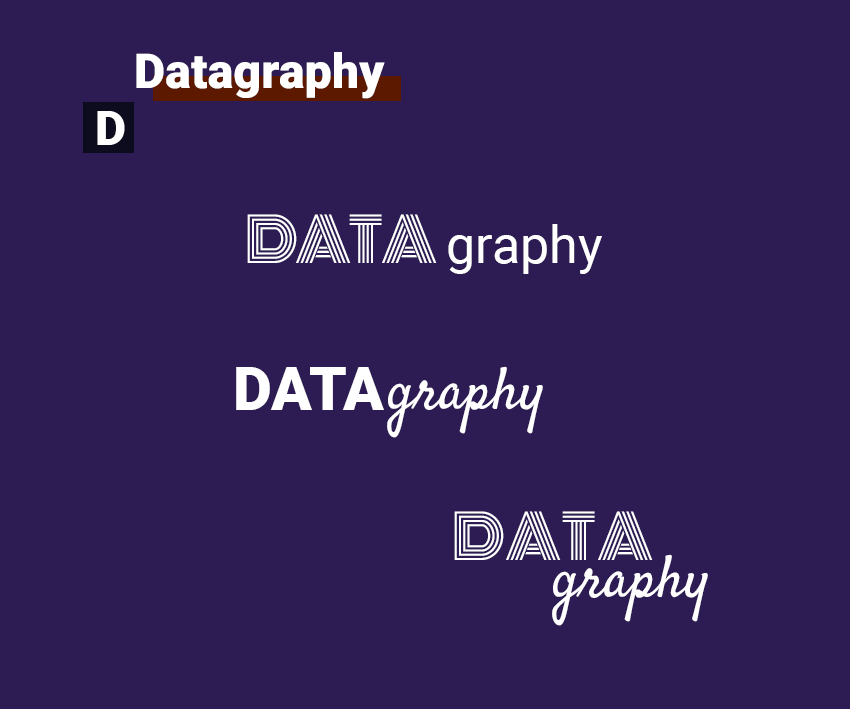
<style>
.page{position:relative;width:850px;height:709px;background:#2d1c54}
.page>*{position:absolute;margin:0}
.t1{font:48px "Roboto-Black";letter-spacing:0.005em;color:#ffffff}
.t2{font:52px "Roboto-Regular";color:#ffffff}
.t3{font:60px "Monoton-Regular";letter-spacing:-0.05em;color:#ffffff}
.t4{font:60px "Satisfy";color:#ffffff}
.t5{font:60px "Roboto-Regular";letter-spacing:-0.18em;color:#ffffff}
.t6{font:60px "Roboto-Black";color:#ffffff}
.t7{font:60px "Monoton-Regular";color:#ffffff}
</style>
<div class="page">
<p class="t1" style="left:136px;top:52px;width:249px;height:47px">Datagraphy</p>
<p class="t1" style="left:97px;top:111px;width:28px;height:34px">D</p>
<p class="t2" style="left:247px;top:214px;width:355px;height:60px"><span class="t3">DATA </span>graphy</p>
<p class="t4" style="left:387px;top:366px;width:156px;height:72px"><span class="t5"> </span>graphy</p>
<p class="t6" style="left:236px;top:367px;width:148px;height:43px">DATA</p>
<p class="t7" style="left:454px;top:511px;width:199px;height:49px">DATA</p>
<p class="t4" style="left:552px;top:554px;width:156px;height:72px"><span class="t5"> </span>graphy</p>
</div>
